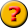
<style>
.page{position:relative;width:28px;height:28px;background:#f6b800}
.page>*{position:absolute;margin:0}
.t1{font:19.7px "Verdana-Bold";font-weight:bold;scale:1.15 1}
</style>
<div class="page">
<p class="t1" style="left:8px;top:6px;width:13px;height:16px">?</p>
</div>
